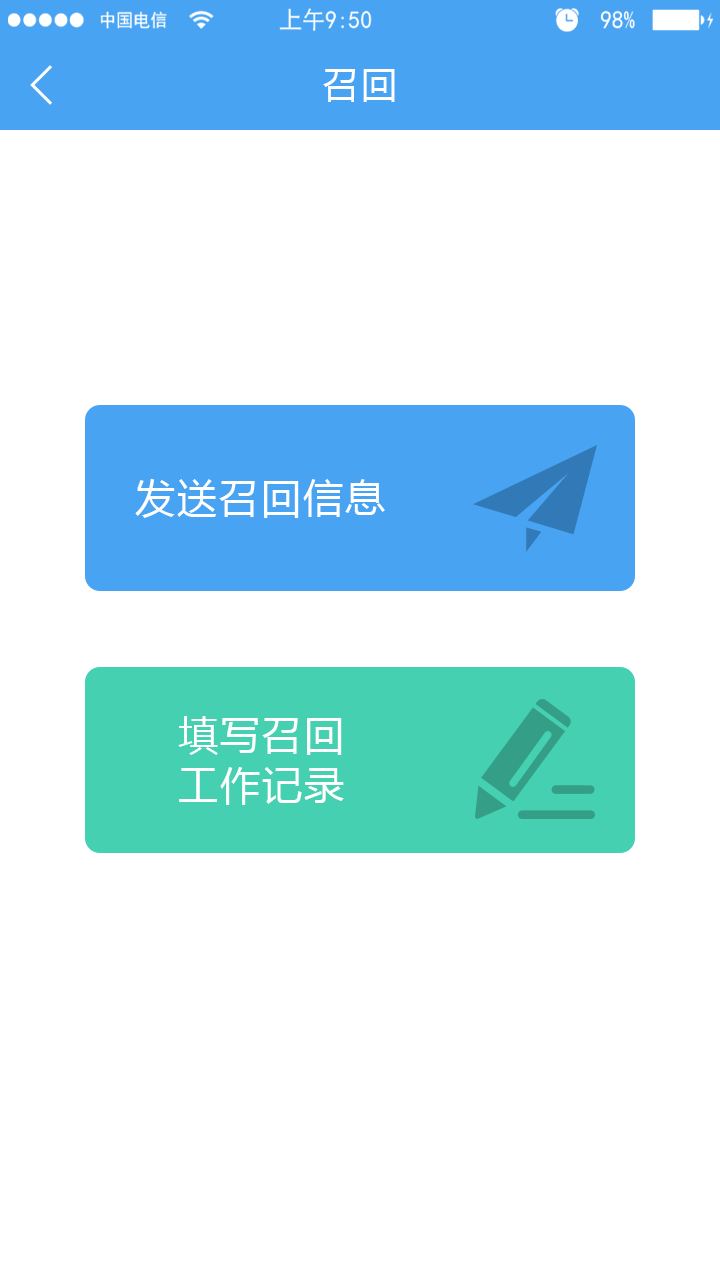
<style>
.page{position:relative;width:720px;height:1280px;background:#ffffff}
.page>*{position:absolute;margin:0}
.t1{font:36px "MicrosoftYaHei";letter-spacing:0.05em;color:#ffffff}
.t2{font:40px "MicrosoftYaHei";letter-spacing:0.05em;color:#ffffff}
.t3{font:40px/50px "MicrosoftYaHei";letter-spacing:0.05em;color:#ffffff}
</style>
<div class="page">
<p class="t1" style="left:323px;top:69px;width:72px;height:33px">召回</p>
<p class="t2" style="left:135px;top:479px;width:250px;height:39px">发送召回信息</p>
<p class="t3" style="left:178px;top:716px;width:166px;height:89px;text-align:center">填写召回<br>工作记录</p>
</div>
